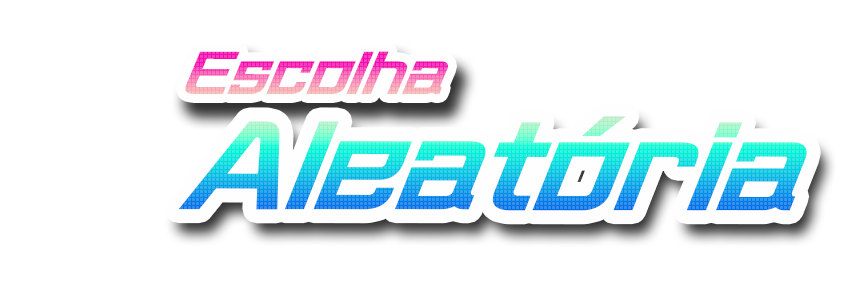
<style>
.page{position:relative;width:860px;height:300px;background:#ffffff}
.page>*{position:absolute;margin:0}
.t1{font:49.1px "KafuTechnoStd-U";font-style:italic;scale:1.13 1}
.t2{font:101.3px "KafuTechnoStd-U";font-style:italic;scale:1.09 1}
</style>
<div class="page">
<p class="t1" style="left:185px;top:51px;width:263px;height:43px">Escolha</p>
<p class="t2" style="left:178px;top:116px;width:629px;height:95px">Aleatória</p>
</div>
